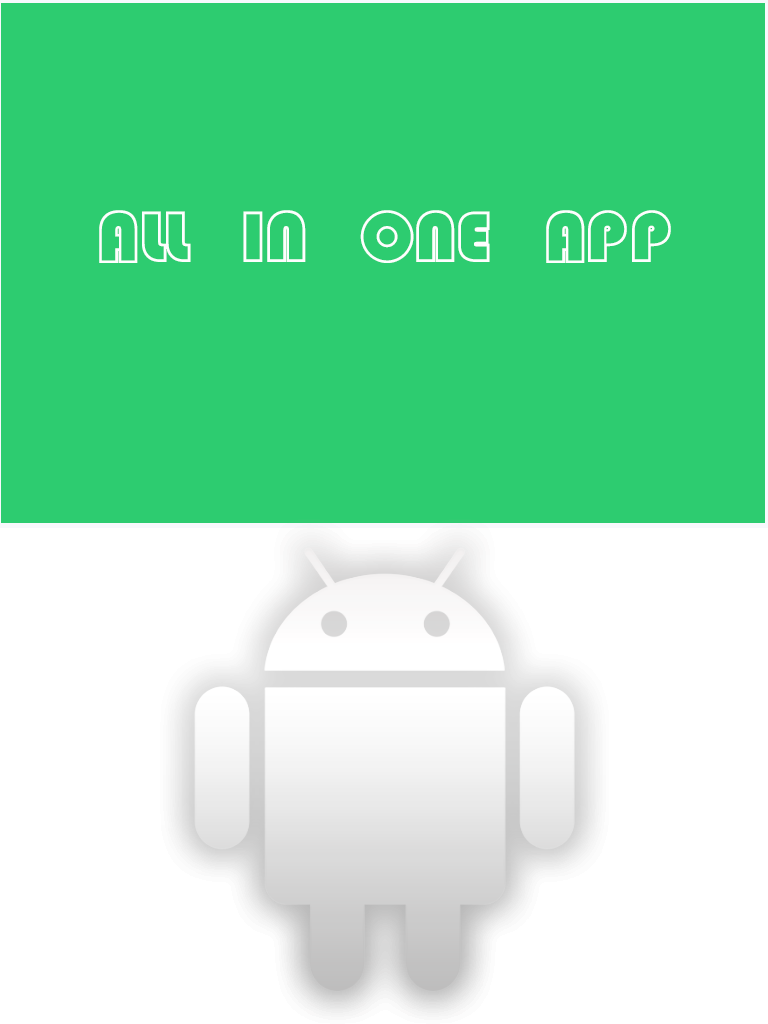
<style>
.page{position:relative;width:768px;height:1024px;background:#2dcc70}
.page>*{position:absolute;margin:0}
.t1{font:72px "STCaiyun";color:#fdfefe}
</style>
<div class="page">
<p class="t1" style="left:99px;top:210px;width:572px;height:53px">ALL   IN   ONE   APP</p>
</div>
